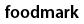
<style>
.page{position:relative;width:84px;height:24px;background:#ffffff}
.page>*{position:absolute;margin:0}
.t1{font:17.5px "MyriadPro-Semibold";color:#000000}
</style>
<div class="page">
<p class="t1" style="left:5px;top:5px;width:74px;height:13px">foodmark</p>
</div>
